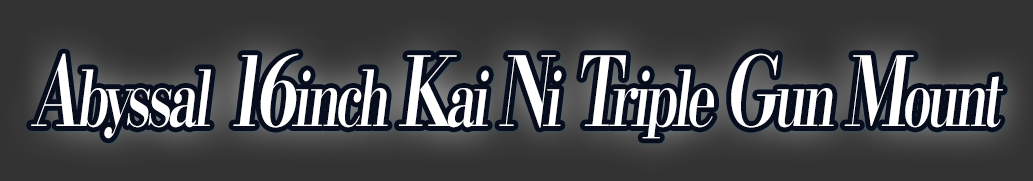
<style>
.page{position:relative;width:1033px;height:181px;background:#333333}
.page>*{position:absolute;margin:0}
.t1{font:76.8px "KochoStd-Heavy";letter-spacing:-0.08em;color:#ffffff;font-style:italic;scale:0.69 1}
.t2{font:96px "KochoStd-Heavy";letter-spacing:-0.08em;color:#ffffff;font-style:italic;scale:0.69 1}
</style>
<div class="page">
<p class="t1" style="left:31px;top:53px;width:972px;height:86px"><span class="t2">A</span>byssal<span class="t2"> 16</span>inch <span class="t2">K</span>ai <span class="t2">N</span>i<span class="t2"> T</span>riple <span class="t2">G</span>un <span class="t2">M</span>ount</p>
</div>
